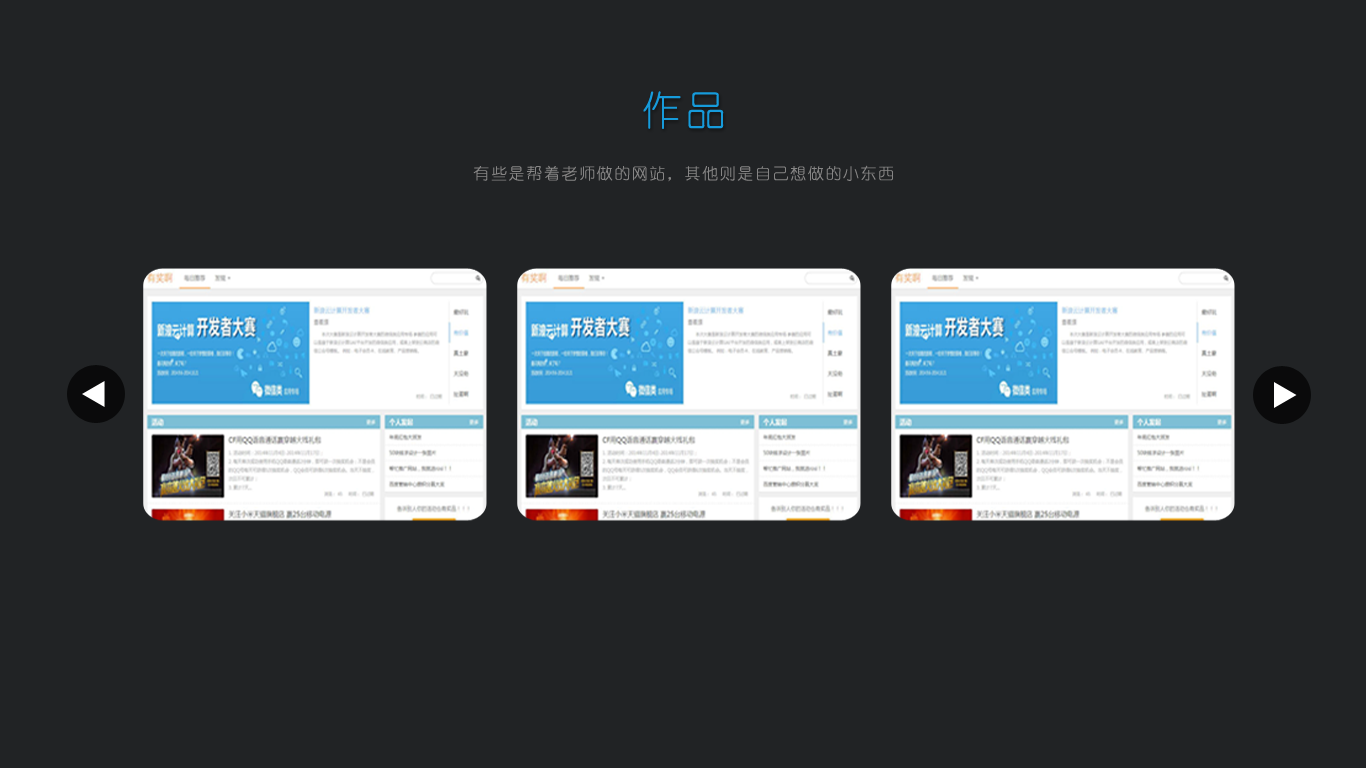
<style>
.page{position:relative;width:1366px;height:768px;background:#212325}
.page>*{position:absolute;margin:0}
.t1{font:40px "YouYuan";letter-spacing:0.1em;color:#169bdb}
.t2{font:16px "YouYuan";letter-spacing:0.1em;color:#868585}
</style>
<div class="page">
<p class="t1" style="left:643px;top:91px;width:81px;height:38px">作品</p>
<p class="t2" style="left:473px;top:165px;width:420px;height:17px">有些是帮着老师做的网站，其他则是自己想做的小东西</p>
</div>
